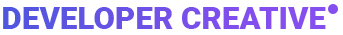
<style>
.page{position:relative;width:343px;height:35px;background:#ffffff}
.page>*{position:absolute;margin:0}
.t1{font:31.2px "Roboto-Black";color:#7151e8}
</style>
<div class="page">
<p class="t1" style="left:3px;top:7px;width:323px;height:22px">DEVELOPER CREATIVE</p>
</div>
